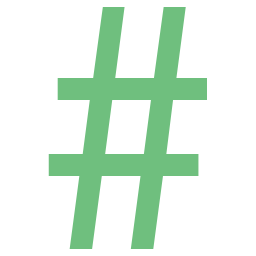
<style>
.page{position:relative;width:256px;height:256px;background:#ffffff}
.page>*{position:absolute;margin:0}
.t1{font:373px "MyriadPro-Regular";color:#6fbf7e}
</style>
<div class="page">
<p class="t1" style="left:48px;top:7px;width:159px;height:242px">#</p>
</div>
